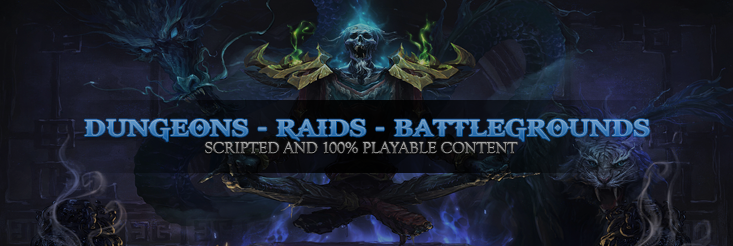
<style>
.page{position:relative;width:733px;height:246px}
.page>*{position:absolute;margin:0}
.t1{font:26px "GodOfWar"}
.t2{font:16px "GoudyOldStyleT-Regular"}
</style>
<div class="page">
<p class="t1" style="left:84px;top:119px;width:566px;height:23px">DUNGEONS - RAIDS - BATTLEGROUNDS</p>
<p class="t2" style="left:205px;top:141px;width:313px;height:13px">SCRIPTED AND 100% PLAYABLE CONTENT</p>
</div>
